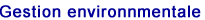
<style>
.page{position:relative;width:205px;height:20px;background:#ffffff}
.page>*{position:absolute;margin:0}
.t1{font:16px "ArialMT";letter-spacing:0.04em;color:#000099;font-weight:bold}
</style>
<div class="page">
<p class="t1" style="left:0px;top:5px;width:201px;height:13px">Gestion environnmentale</p>
</div>
